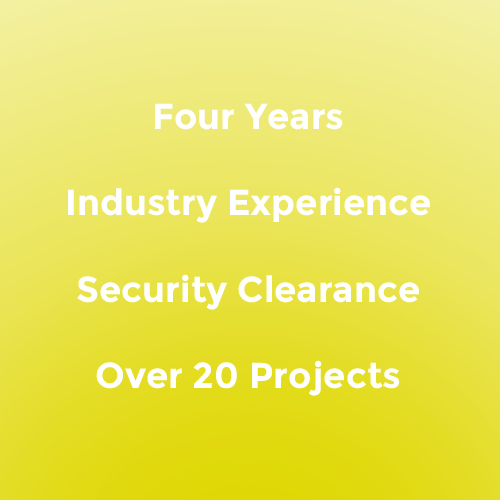
<style>
.page{position:relative;width:500px;height:500px}
.page>*{position:absolute;margin:0}
.t1{font:36px "Montserrat-Bold";color:#ffffff}
</style>
<div class="page">
<p class="t1" style="left:68px;top:103px;width:362px;height:293px;text-align:center">Four Years<br><br>Industry Experience<br><br>Security Clearance<br><br>Over 20 Projects</p>
</div>
